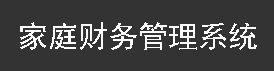
<style>
.page{position:relative;width:274px;height:71px;background:#333333}
.page>*{position:absolute;margin:0}
.t1{font:30px "SimHei";color:#fbfbfb}
</style>
<div class="page">
<p class="t1" style="left:20px;top:22px;width:237px;height:28px">家庭财务管理系统</p>
</div>
